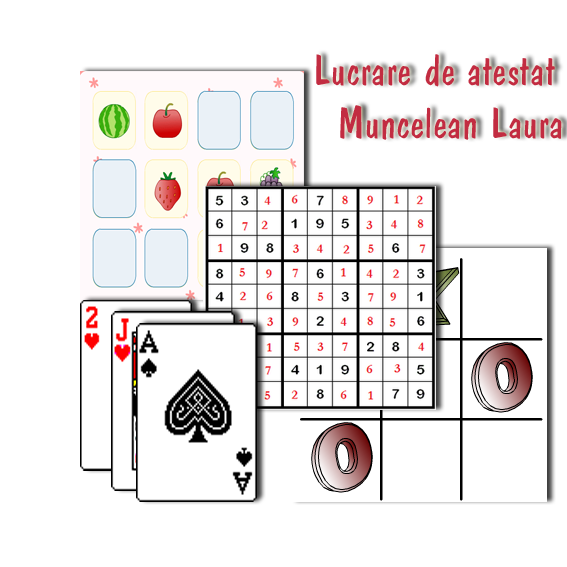
<style>
.page{position:relative;width:567px;height:567px;background:#ffffff}
.page>*{position:absolute;margin:0}
.t1{font:44px "Dominican";color:#c22c41}
</style>
<div class="page">
<p class="t1" style="left:316px;top:54px;width:246px;height:86px">Lucrare de atestat<br>  Muncelean Laura</p>
</div>
